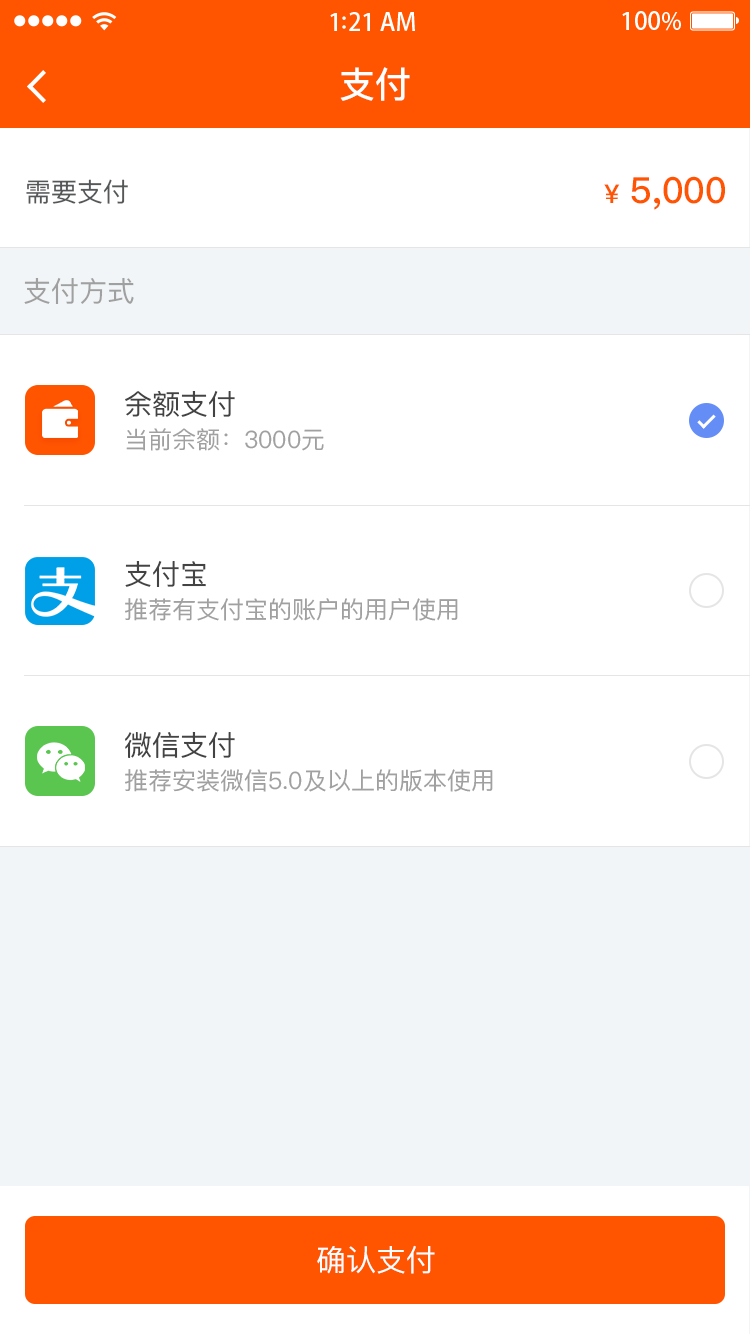
<style>
.page{position:relative;width:750px;height:1334px;background:#ffffff}
.page>*{position:absolute;margin:0}
.t1{font:36px "PingFangSC-Medium";color:#ffffff}
.t2{font:26px "PingFangSC-Regular";color:#555759}
.t3{font:36px "PingFangSC-Medium";color:#ff5400}
.t4{font:26px "PingFangSC-Medium";color:#ff5400}
.t5{font:28px "PingFangSC-Regular";color:#a0a0a0}
.t6{font:28px "PingFangSC-Regular";color:#434343}
.t7{font:24px "PingFangSC-Regular";color:#a0a0a0}
.t8{font:30px "PingFangSC-Regular";color:#ffffff;text-transform:uppercase}
</style>
<div class="page">
<p class="t1" style="left:340px;top:67px;width:70px;height:34px">支付</p>
<p class="t2" style="left:26px;top:179px;width:102px;height:25px">需要支付</p>
<p class="t3" style="left:604px;top:176px;width:121px;height:34px"><span class="t4">¥ </span>5,000</p>
<p class="t5" style="left:24px;top:277px;width:110px;height:27px">支付方式</p>
<p class="t6" style="left:125px;top:390px;width:110px;height:27px">余额支付</p>
<p class="t7" style="left:126px;top:428px;width:198px;height:23px">当前余额：3000元</p>
<p class="t6" style="left:125px;top:560px;width:81px;height:27px">支付宝</p>
<p class="t7" style="left:125px;top:598px;width:333px;height:23px">推荐有支付宝的账户的用户使用</p>
<p class="t6" style="left:125px;top:731px;width:110px;height:27px">微信支付</p>
<p class="t7" style="left:125px;top:769px;width:368px;height:23px">推荐安装微信5.0及以上的版本使用</p>
<p class="t8" style="left:317px;top:1245px;width:118px;height:29px">确认支付</p>
</div>
